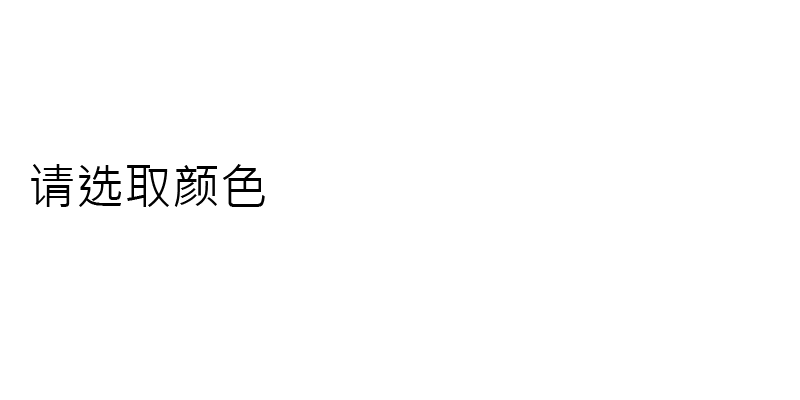
<style>
.page{position:relative;width:800px;height:400px;background:#ffffff}
.page>*{position:absolute;margin:0}
.t1{font:48px "MicrosoftJhengHeiRegular";color:#000000}
</style>
<div class="page">
<p class="t1" style="left:31px;top:164px;width:234px;height:43px">请选取颜色</p>
</div>
